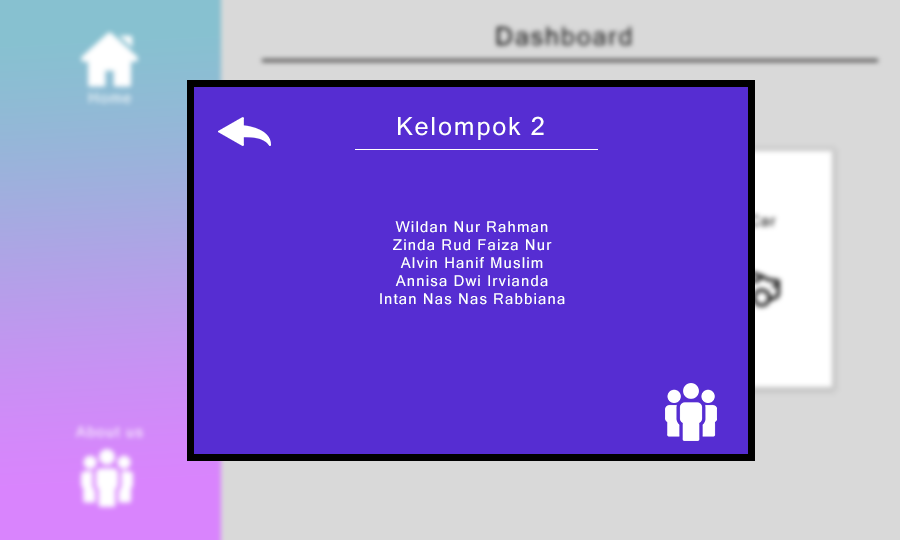
<style>
.page{position:relative;width:900px;height:540px;background:#562dd2}
.page>*{position:absolute;margin:0}
.t1{font:25px "MicrosoftSansSerif";letter-spacing:0.075em;color:#ffffff}
.t2{font:15px "MicrosoftSansSerif";letter-spacing:0.075em;color:#ffffff}
</style>
<div class="page">
<p class="t1" style="left:398px;top:116px;width:146px;height:24px">Kelompok 2</p>
<p class="t2" style="left:380px;top:221px;width:185px;height:84px;text-align:center">Wildan Nur Rahman<br>Zinda Rud Faiza Nur<br>Alvin Hanif Muslim<br>Annisa Dwi Irvianda<br>Intan Nas Nas Rabbiana</p>
</div>
